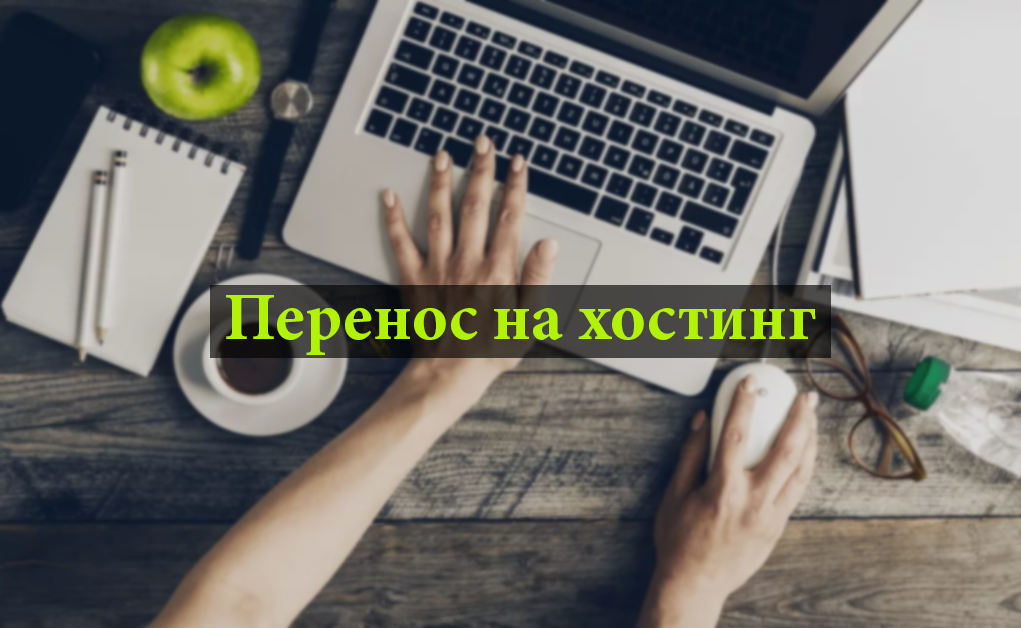
<style>
.page{position:relative;width:1021px;height:628px}
.page>*{position:absolute;margin:0}
.t1{font:68px "MinionPro-Bold";color:#b2f206}
</style>
<div class="page">
<p class="t1" style="left:226px;top:295px;width:590px;height:60px">Перенос на хостинг</p>
</div>
